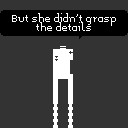
<style>
.page{position:relative;width:128px;height:128px;background:#333333}
.page>*{position:absolute;margin:0}
.t1{font:8px "Memoria";color:#ffffff}
</style>
<div class="page">
<p class="t1" style="left:12px;top:13px;width:104px;height:18px;text-align:center">But she didn't grasp<br>the details</p>
</div>
